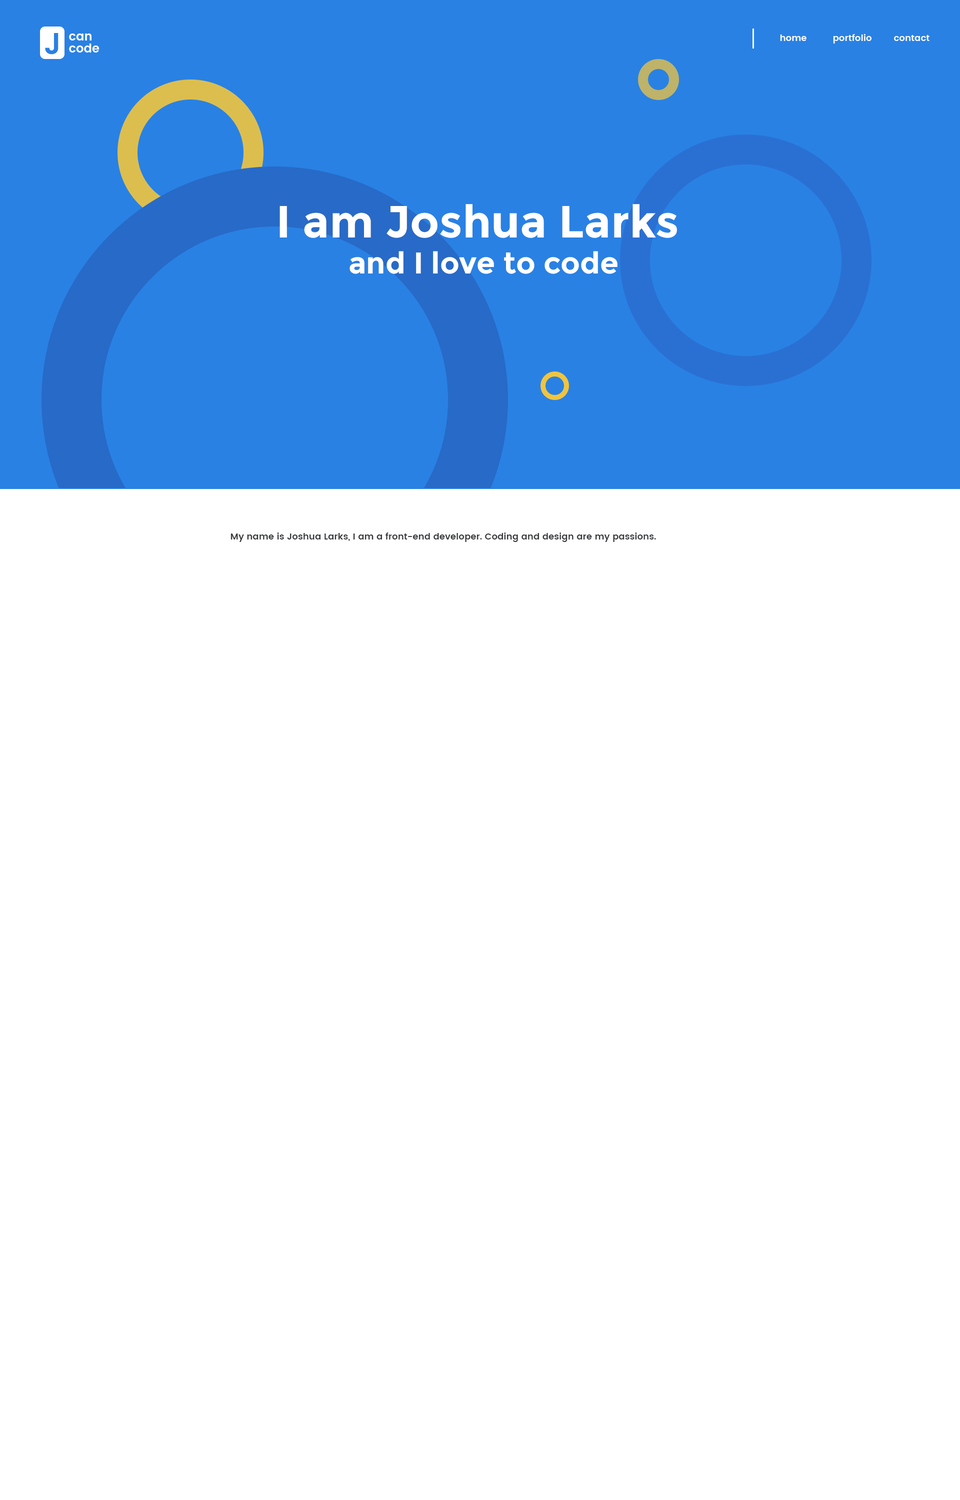
<style>
.page{position:relative;width:960px;height:1500px;background:#ffffff}
.page>*{position:absolute;margin:0}
.t1{font:30px "Poppins-SemiBold";color:#2981e4}
.t2{font:12px/12px "Poppins-SemiBold";color:#ffffff}
.t3{font:9px "Poppins-SemiBold";color:#ffffff}
.t4{font:30px "Montserrat-Bold";color:#ffffff}
.t5{font:45px "Montserrat-Bold";color:#ffffff}
.t6{font:9px "Poppins-SemiBold";color:#393b3e}
</style>
<div class="page">
<p class="t1" style="left:45px;top:33px;width:13px;height:21px">J</p>
<p class="t2" style="left:69px;top:34px;width:31px;height:18px">can<br>code</p>
<p class="t3" style="left:780px;top:34px;width:26px;height:7px">home</p>
<p class="t3" style="left:833px;top:34px;width:39px;height:10px">portfolio</p>
<p class="t3" style="left:894px;top:35px;width:36px;height:6px">contact</p>
<p class="t4" style="left:280px;top:204px;width:397px;height:70px;text-align:center"><span class="t5">I am Joshua Larks <br></span>and I love to code</p>
<p class="t6" style="left:230px;top:532px;width:426px;height:10px">My name is Joshua Larks, I am a front-end developer. Coding and design are my passions.</p>
</div>
